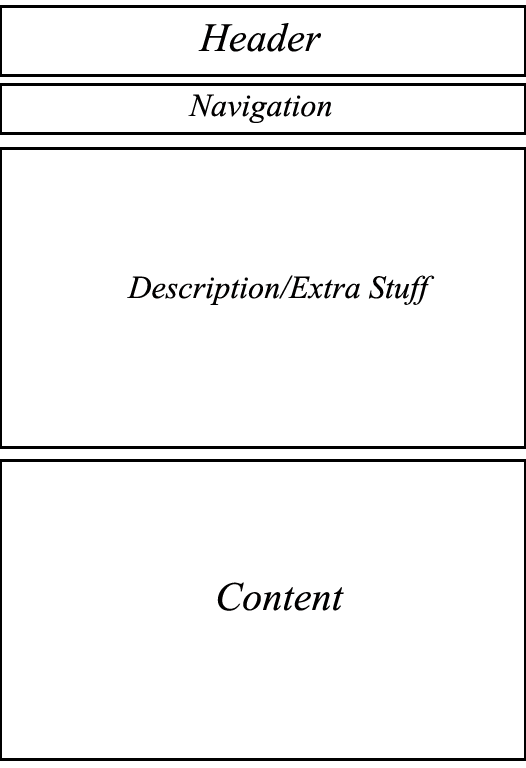
<style>
.page{position:relative;width:526px;height:768px;background:#ffffff}
.page>*{position:absolute;margin:0}
.t1{font:50px "Vijaya";color:#010000}
.t2{font:40px "Vijaya";color:#010000}
</style>
<div class="page">
<p class="t1" style="left:198px;top:23px;width:123px;height:29px">Header</p>
<p class="t2" style="left:188px;top:94px;width:144px;height:29px">Navigation</p>
<p class="t2" style="left:127px;top:275px;width:308px;height:30px">Description/Extra Stuff</p>
<p class="t1" style="left:217px;top:582px;width:127px;height:29px">Content</p>
</div>
